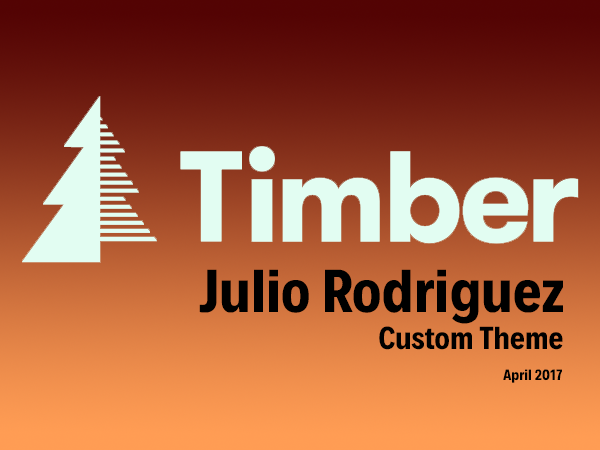
<style>
.page{position:relative;width:600px;height:450px}
.page>*{position:absolute;margin:0}
.t1{font:61.4px "Decalotype-Bold";color:#000000}
.t2{font:31.9px "Decalotype-Bold";color:#000000}
.t3{font:15.2px "Decalotype-Bold";color:#000000}
</style>
<div class="page">
<p class="t1" style="left:199px;top:269px;width:364px;height:55px">Julio Rodriguez</p>
<p class="t2" style="left:379px;top:326px;width:184px;height:24px">Custom Theme</p>
<p class="t3" style="left:503px;top:369px;width:59px;height:14px">April 2017</p>
</div>
